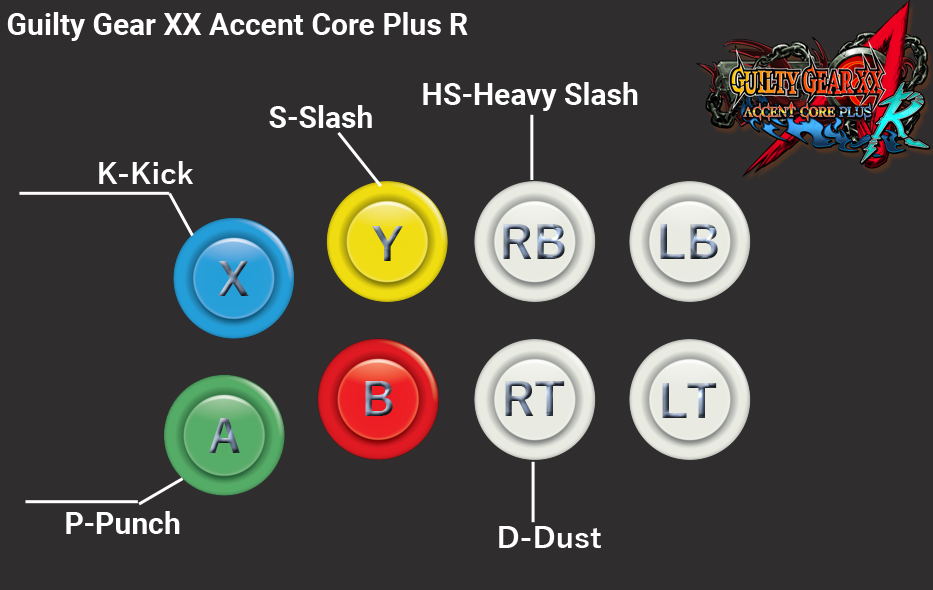
<style>
.page{position:relative;width:933px;height:590px;background:#2f2d2e}
.page>*{position:absolute;margin:0}
.t1{font:30px "Roboto-Bold";color:#ffffff}
.t2{font:30px "YuGothic-Bold";color:#ffffff}
</style>
<div class="page">
<p class="t1" style="left:7px;top:12px;width:461px;height:29px">Guilty Gear XX Accent Core Plus R</p>
<p class="t1" style="left:423px;top:82px;width:215px;height:29px">HS-Heavy Slash</p>
<p class="t1" style="left:269px;top:105px;width:103px;height:23px">S-Slash</p>
<p class="t2" style="left:99px;top:161px;width:94px;height:23px">K-Kick</p>
<p class="t1" style="left:66px;top:511px;width:114px;height:23px">P-Punch</p>
<p class="t2" style="left:499px;top:526px;width:102px;height:22px">D-Dust</p>
</div>
